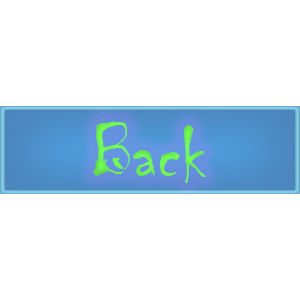
<style>
.page{position:relative;width:300px;height:300px;background:#ffffff}
.page>*{position:absolute;margin:0}
.t1{font:80px "Chiller-Regular";color:#73ff57}
</style>
<div class="page">
<p class="t1" style="left:93px;top:119px;width:113px;height:64px">Back</p>
</div>
